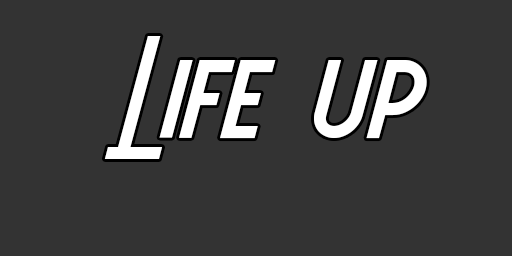
<style>
.page{position:relative;width:512px;height:256px;background:#333333}
.page>*{position:absolute;margin:0}
.t1{font:150px "AeroviasBrasilNF";color:#ffffff}
</style>
<div class="page">
<p class="t1" style="left:104px;top:36px;width:323px;height:123px">Life up</p>
</div>
